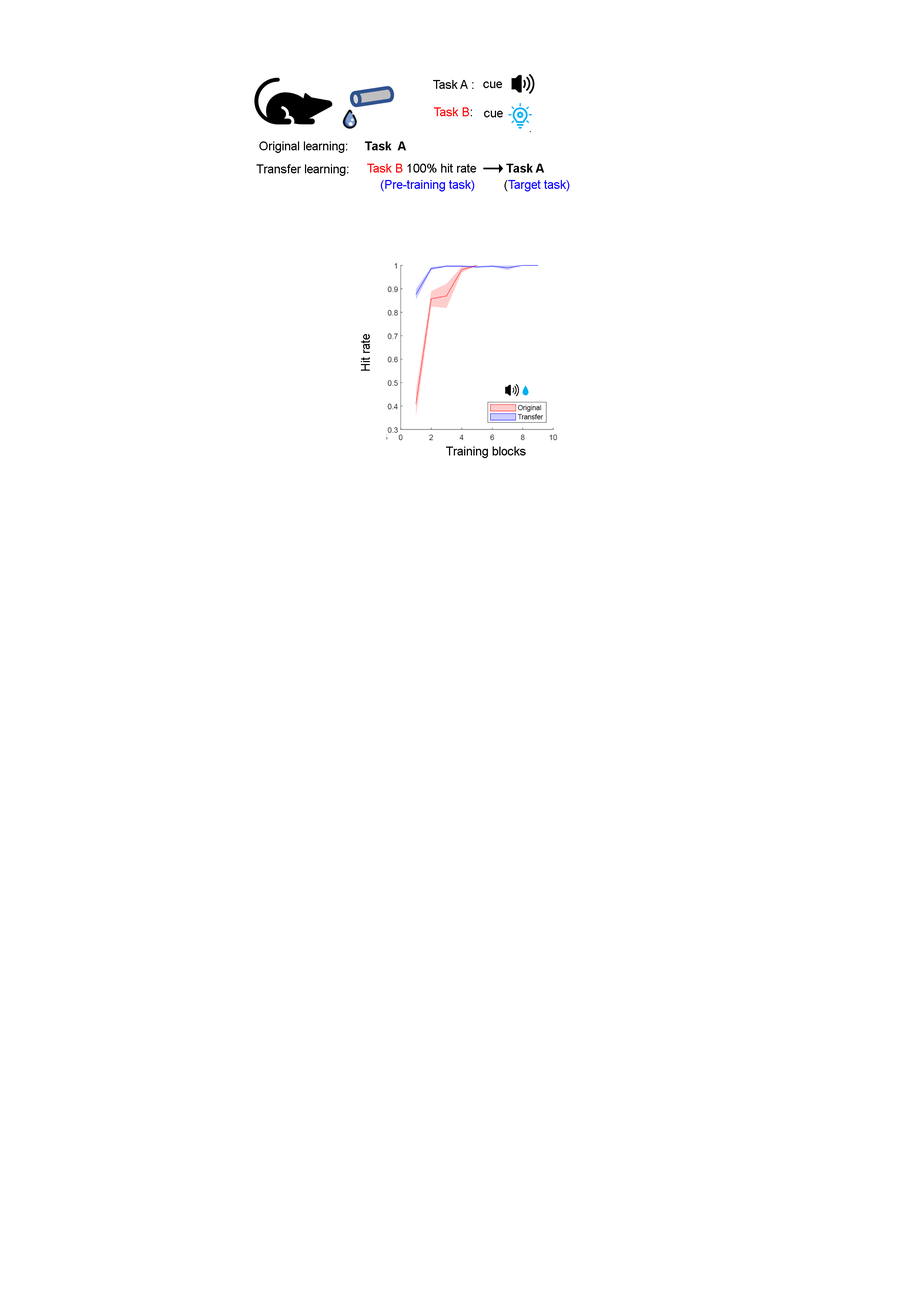
<style>
.page{position:relative;width:918px;height:1299px;background:#ffffff}
.page>*{position:absolute;margin:0}
.t1{font:12.3px "ArialMT";color:#000000}
.t2{font:12.3px "ArialMT";color:#fd0606}
.t3{font:12.3px "Arial-BoldMT";color:#000000}
.t4{font:12.3px "ArialMT";color:#fd0000}
.t5{font:12.3px "Arial-BoldMT";color:#070707}
.t6{font:12.3px "ArialMT";color:#0900ff}
.t7{font:12.3px "ArialMT";color:#0d04fe}
.t8{font:12.3px "ArialMT";color:#070707}
</style>
<div class="page">
<p class="t1" style="left:433px;top:80px;width:41px;height:9px">Task A :</p>
<p class="t1" style="left:484px;top:81px;width:18px;height:7px">cue</p>
<p class="t2" style="left:434px;top:107px;width:38px;height:9px">Task B<span class="t1">:</span></p>
<p class="t1" style="left:484px;top:111px;width:19px;height:6px">cue</p>
<p class="t1" style="left:260px;top:141px;width:87px;height:12px">Original learning:</p>
<p class="t3" style="left:365px;top:141px;width:41px;height:9px">Task  A</p>
<p class="t1" style="left:257px;top:164px;width:91px;height:12px">Transfer learning:</p>
<p class="t1" style="left:367px;top:164px;width:109px;height:9px"><span class="t4">Task B</span> 100% hit rate</p>
<p class="t5" style="left:506px;top:164px;width:38px;height:9px">Task A</p>
<p class="t6" style="left:381px;top:180px;width:93px;height:11px">(Pre-training task)</p>
<p class="t7" style="left:505px;top:180px;width:64px;height:11px"><span class="t8">(</span>Target task)</p>
<p class="t8" style="left:361px;top:334px;width:9px;height:37px;rotate:-90deg">Hit rate</p>
<p class="t1" style="left:446px;top:446px;width:80px;height:12px">Training blocks</p>
</div>
